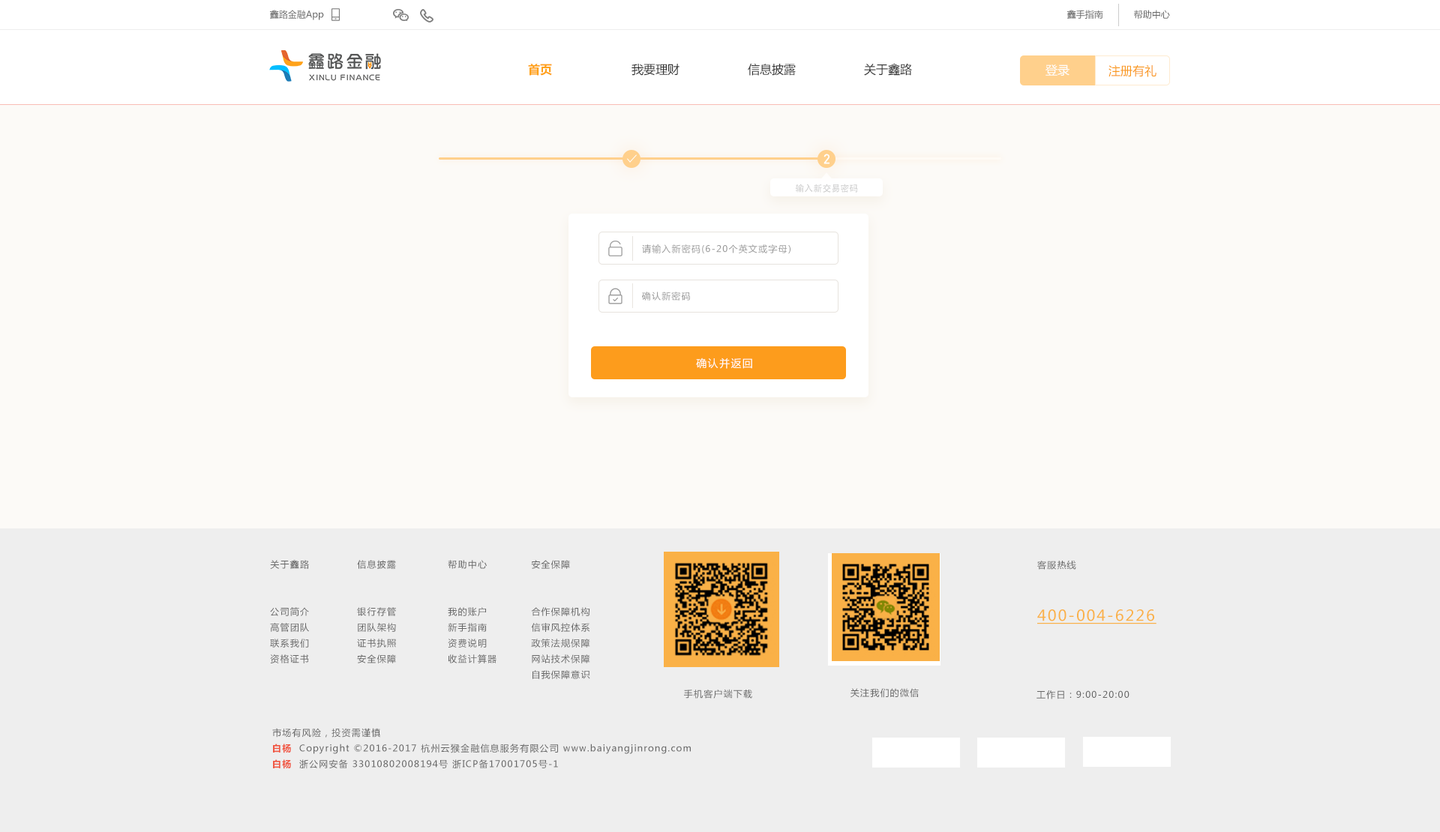
<style>
.page{position:relative;width:1440px;height:832px;background:#fcfaf7}
.page>*{position:absolute;margin:0}
.t1{font:9px "MicrosoftYaHei";color:#666666}
.t2{font:12px "MicrosoftYaHei-Bold";color:#ffa21a}
.t3{font:12px "MicrosoftYaHei";color:#333333}
.t4{font:12px "MicrosoftYaHei";color:#ffffff}
.t5{font:12px "MicrosoftYaHei";color:#f99a1d}
.t6{font:13.5px "DINAlternate-Bold";letter-spacing:0.1em;color:#ffffff}
.t7{font:9px "AdobeHeitiStd-Regular";color:#cccccc}
.t8{font:9px "MicrosoftYaHei";letter-spacing:0.1em;color:#999999}
.t9{font:10.5px "MicrosoftYaHei";letter-spacing:0.1em;color:#ffffff}
.t10{font:9px "MicrosoftYaHei";letter-spacing:0.1em;color:#666666}
.t11{font:15px "MicrosoftYaHei";letter-spacing:0.1em;color:#fab147;text-decoration:underline}
.t12{font:9px "MicrosoftYaHei-Bold";letter-spacing:0.1em;color:#f05945}
</style>
<div class="page">
<p class="t1" style="left:269px;top:10px;width:55px;height:10px">鑫路金融App</p>
<p class="t1" style="left:1066px;top:10px;width:37px;height:9px">鑫手指南</p>
<p class="t1" style="left:1134px;top:10px;width:36px;height:9px">帮助中心</p>
<p class="t2" style="left:528px;top:64px;width:24px;height:12px">首页</p>
<p class="t3" style="left:631px;top:64px;width:48px;height:12px">我要理财</p>
<p class="t3" style="left:748px;top:63px;width:48px;height:13px">信息披露</p>
<p class="t3" style="left:864px;top:63px;width:48px;height:13px">关于鑫路</p>
<p class="t4" style="left:1045px;top:64px;width:24px;height:12px">登录</p>
<p class="t5" style="left:1108px;top:64px;width:48px;height:13px">注册有礼</p>
<p class="t6" style="left:823px;top:154px;width:6px;height:10px">2</p>
<p class="t7" style="left:795px;top:184px;width:63px;height:9px">输入新交易密码</p>
<p class="t8" style="left:642px;top:244px;width:148px;height:10px">请输入新密码(6-20个英文或字母)</p>
<p class="t8" style="left:641px;top:292px;width:49px;height:9px">确认新密码</p>
<p class="t9" style="left:696px;top:358px;width:56px;height:11px">确认并返回</p>
<p class="t10" style="left:270px;top:560px;width:39px;height:104px">关于鑫路<br><br><br>公司简介<br>高管团队<br>联系我们<br>资格证书</p>
<p class="t10" style="left:357px;top:560px;width:39px;height:104px">信息披露<br><br><br>银行存管<br>团队架构<br>证书执照<br>安全保障</p>
<p class="t10" style="left:448px;top:560px;width:48px;height:104px">帮助中心<br><br><br>我的账户<br>新手指南<br>资费说明<br>收益计算器</p>
<p class="t10" style="left:531px;top:560px;width:59px;height:119px">安全保障<br><br><br>合作保障机构<br>信审风控体系<br>政策法规保障<br>网站技术保障<br>自我保障意识</p>
<p class="t10" style="left:1037px;top:560px;width:39px;height:10px">客服热线</p>
<p class="t11" style="left:1037px;top:610px;width:119px;height:15px">400-004-6226</p>
<p class="t10" style="left:684px;top:689px;width:68px;height:10px">手机客户端下载</p>
<p class="t10" style="left:850px;top:688px;width:69px;height:10px">关注我们的微信</p>
<p class="t10" style="left:1036px;top:691px;width:93px;height:9px">工作日：9:00-20:00</p>
<p class="t10" style="left:272px;top:728px;width:108px;height:10px">市场有风险，投资需谨慎</p>
<p class="t10" style="left:273px;top:744px;width:418px;height:25px"><span class="t12">白杨 </span> Copyright ©2016-2017 杭州云猴金融信息服务有限公司 www.baiyangjinrong.com<br><span class="t12">白杨 </span> 浙公网安备 33010802008194号 浙ICP备17001705号-1</p>
</div>
